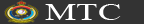
<style>
.page{position:relative;width:144px;height:24px;background:#333333}
.page>*{position:absolute;margin:0}
.t1{font:24px "TimesNewRomanPSMT";color:#ffffff;scale:1.46 1}
</style>
<div class="page">
<p class="t1" style="left:45px;top:4px;width:76px;height:16px">MTC</p>
</div>
